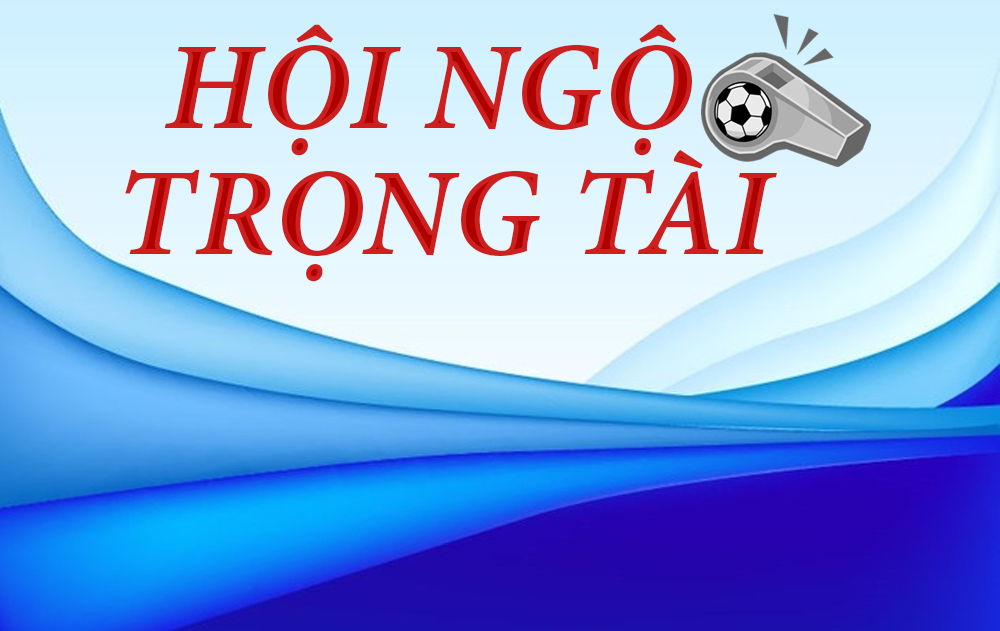
<style>
.page{position:relative;width:1000px;height:631px}
.page>*{position:absolute;margin:0}
.t1{font:125px/126px "MinionPro-BoldIt";letter-spacing:0.01em;color:#ce1f1f;text-transform:uppercase}
</style>
<div class="page">
<p class="t1" style="left:125px;top:24px;width:652px;height:258px;text-align:center">HỘI NGỘ <br>TRỌNG TÀI</p>
</div>
